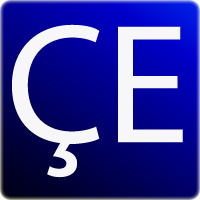
<style>
.page{position:relative;width:200px;height:200px}
.page>*{position:absolute;margin:0}
.t1{font:170px "MyriadPro-Regular";color:#f7f7f9}
</style>
<div class="page">
<p class="t1" style="left:12px;top:24px;width:171px;height:154px">ÇE</p>
</div>
